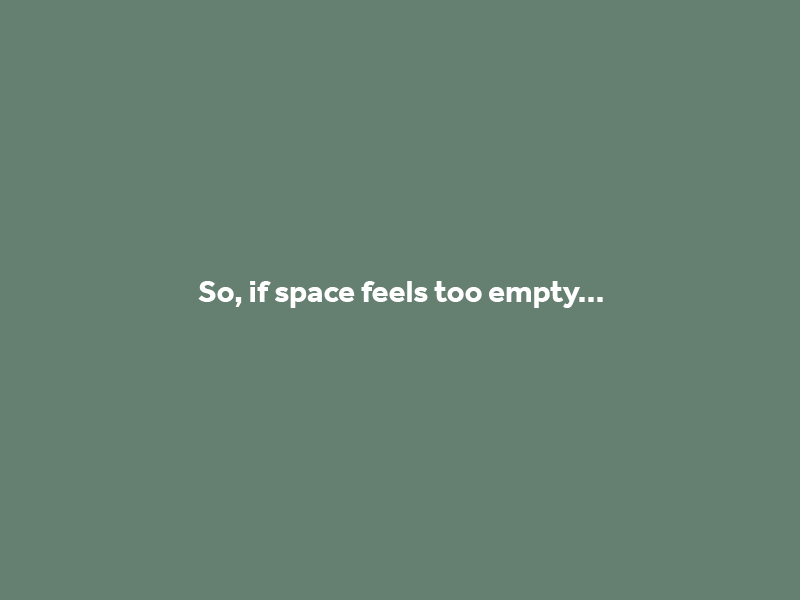
<style>
.page{position:relative;width:800px;height:600px;background:#658071}
.page>*{position:absolute;margin:0}
.t1{font:31.6px "Effra-Bold";color:#ffffff}
</style>
<div class="page">
<p class="t1" style="left:198px;top:281px;width:405px;height:27px">So, if space feels too empty...</p>
</div>
